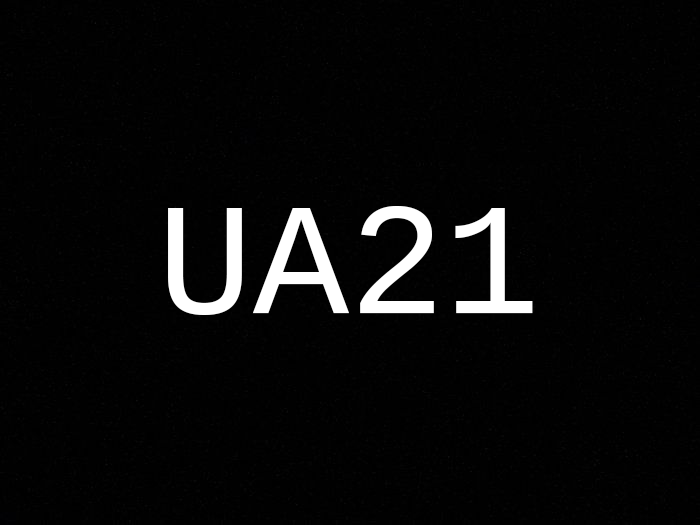
<style>
.page{position:relative;width:700px;height:525px;background:#010101}
.page>*{position:absolute;margin:0}
.t1{font:159.7px "LiberationMono";color:#ffffff}
</style>
<div class="page">
<p class="t1" style="left:168px;top:206px;width:365px;height:109px">UA21</p>
</div>
